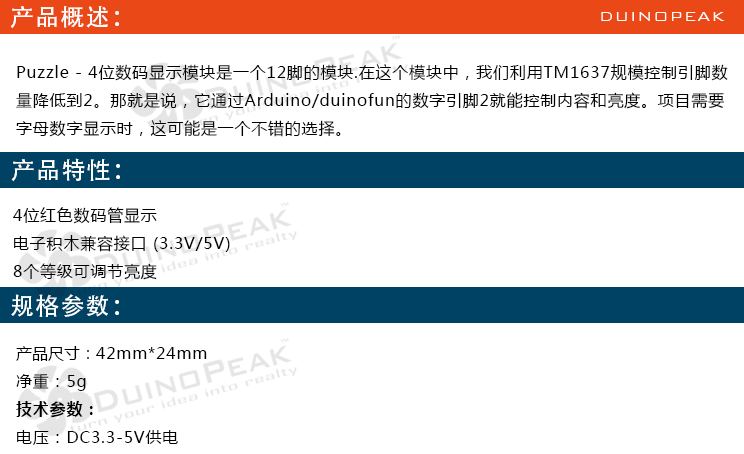
<style>
.page{position:relative;width:744px;height:454px;background:#ffffff}
.page>*{position:absolute;margin:0}
.t1{font:24px "AdobeHeitiStd-Regular";letter-spacing:0.05em;color:#ffffff}
.t2{font:18px "BankGothicBT-Light";letter-spacing:0.05em;color:#ffffff}
.t3{font:16px "MicrosoftYaHei";letter-spacing:0.05em;color:#000000}
.t4{font:16px "MicrosoftYaHei";color:#000000}
.t5{font:16px "MicrosoftYaHei-Bold";letter-spacing:0.05em;color:#000000}
</style>
<div class="page">
<p class="t1" style="left:10px;top:6px;width:109px;height:23px">产品概述：</p>
<p class="t2" style="left:601px;top:12px;width:124px;height:9px">DUINOPEAK</p>
<p class="t3" style="left:16px;top:64px;width:712px;height:73px">Puzzle - 4位数码显示模块是一个12脚的模块.在这个模块中，我们利用TM1637规模控制引脚数<br>量降低到2。那就是说，它通过Arduino/duinofun的数字引脚2就能控制内容和亮度。项目需要<br>字母数字显示时，这可能是一个不错的选择。</p>
<p class="t1" style="left:11px;top:158px;width:109px;height:24px">产品特性：</p>
<p class="t3" style="left:13px;top:207px;width:217px;height:73px">4位红色数码管显示<br>电子积木兼容接口 (3.3V/5V)<br>8个等级可调节亮度</p>
<p class="t1" style="left:11px;top:294px;width:108px;height:23px">规格参数：</p>
<p class="t3" style="left:16px;top:346px;width:191px;height:99px"><span class="t4">产品尺寸：</span>42mm*24mm<br>净重：5g<br><span class="t5">技术参数：<br></span>电压：DC3.3-5V供电</p>
</div>
